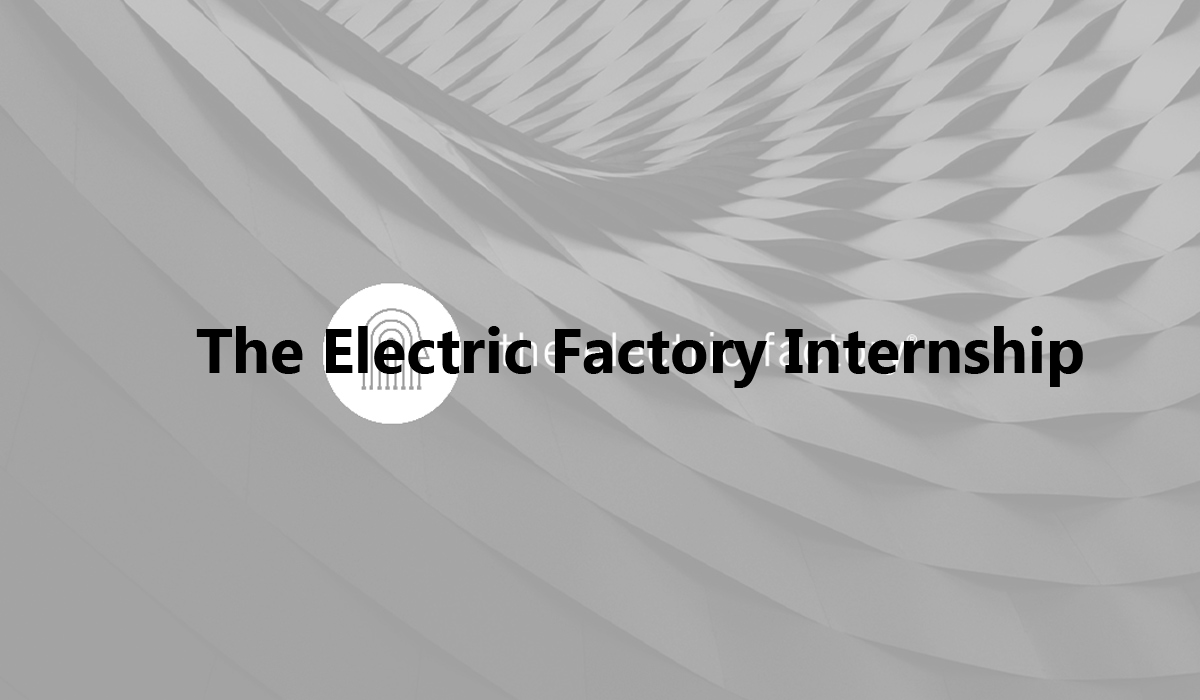
<style>
.page{position:relative;width:1200px;height:700px}
.page>*{position:absolute;margin:0}
.t1{font:62.5px "MicrosoftTaiLe-Bold";color:#000000}
</style>
<div class="page">
<p class="t1" style="left:196px;top:326px;width:887px;height:62px">The Electric Factory Internship</p>
</div>
